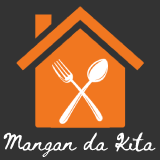
<style>
.page{position:relative;width:160px;height:160px;background:#333333}
.page>*{position:absolute;margin:0}
.t1{font:17px "BethEllen-Regular";color:#ffffff}
</style>
<div class="page">
<p class="t1" style="left:3px;top:132px;width:153px;height:26px">Mangan da Kita</p>
</div>
